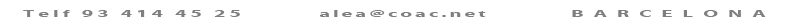
<style>
.page{position:relative;width:798px;height:25px;background:#ffffff}
.page>*{position:absolute;margin:0}
.t1{font:10px "MyriadWebPro-Bold";letter-spacing:0.2em;color:#7f7f7f;scale:2 1}
.t2{font:10px "MyriadWebPro-Bold";letter-spacing:0.15em;color:#7f7f7f;scale:2 1}
.t3{font:10px "MyriadWebPro-Bold";letter-spacing:0.5em;color:#7f7f7f;scale:2 1}
</style>
<div class="page">
<p class="t1" style="left:23px;top:10px;width:743px;height:7px">Telf 93 414 45 25    <span class="t2">alea@coac.net     </span><span class="t3">BARCELONA</span></p>
</div>
